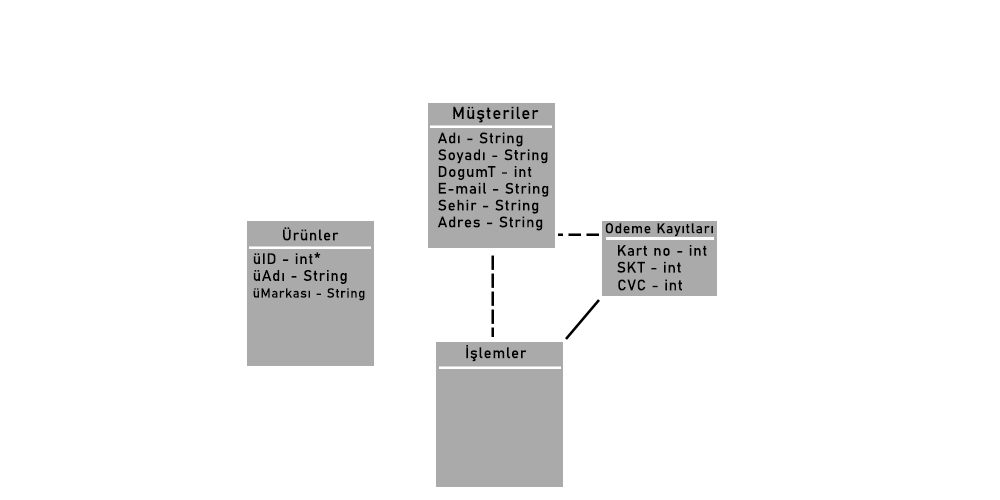
<style>
.page{position:relative;width:1000px;height:500px;background:#ffffff}
.page>*{position:absolute;margin:0}
.t1{font:17px "Bahnschrift";letter-spacing:0.05em;color:#000000}
.t2{font:15px/16.8px "Bahnschrift";letter-spacing:0.05em;color:#000000}
.t3{font:15px "Bahnschrift";letter-spacing:0.05em;color:#000000}
.t4{font:14px "Bahnschrift";letter-spacing:0.05em;color:#000000}
.t5{font:13px/16.8px "Bahnschrift";letter-spacing:0.05em;color:#000000}
</style>
<div class="page">
<p class="t1" style="left:453px;top:106px;width:86px;height:17px">Müşteriler</p>
<p class="t2" style="left:437px;top:132px;width:112px;height:99px">Adı - String<br>Soyadı - String<br>DogumT - int<br>E-mail - String<br>Sehir - String<br>Adres - String</p>
<p class="t3" style="left:283px;top:227px;width:56px;height:14px">Ürünler</p>
<p class="t4" style="left:605px;top:223px;width:108px;height:14px">Odeme Kayıtları</p>
<p class="t2" style="left:617px;top:245px;width:90px;height:28px">Kart no - int<br>SKT - int</p>
<p class="t2" style="left:253px;top:252px;width:112px;height:49px">üID - int*<br>üAdı - String<br><span class="t5">üMarkası - String</span></p>
<p class="t3" style="left:618px;top:279px;width:64px;height:12px">CVC - int</p>
<p class="t3" style="left:466px;top:345px;width:61px;height:17px">İşlemler</p>
</div>
